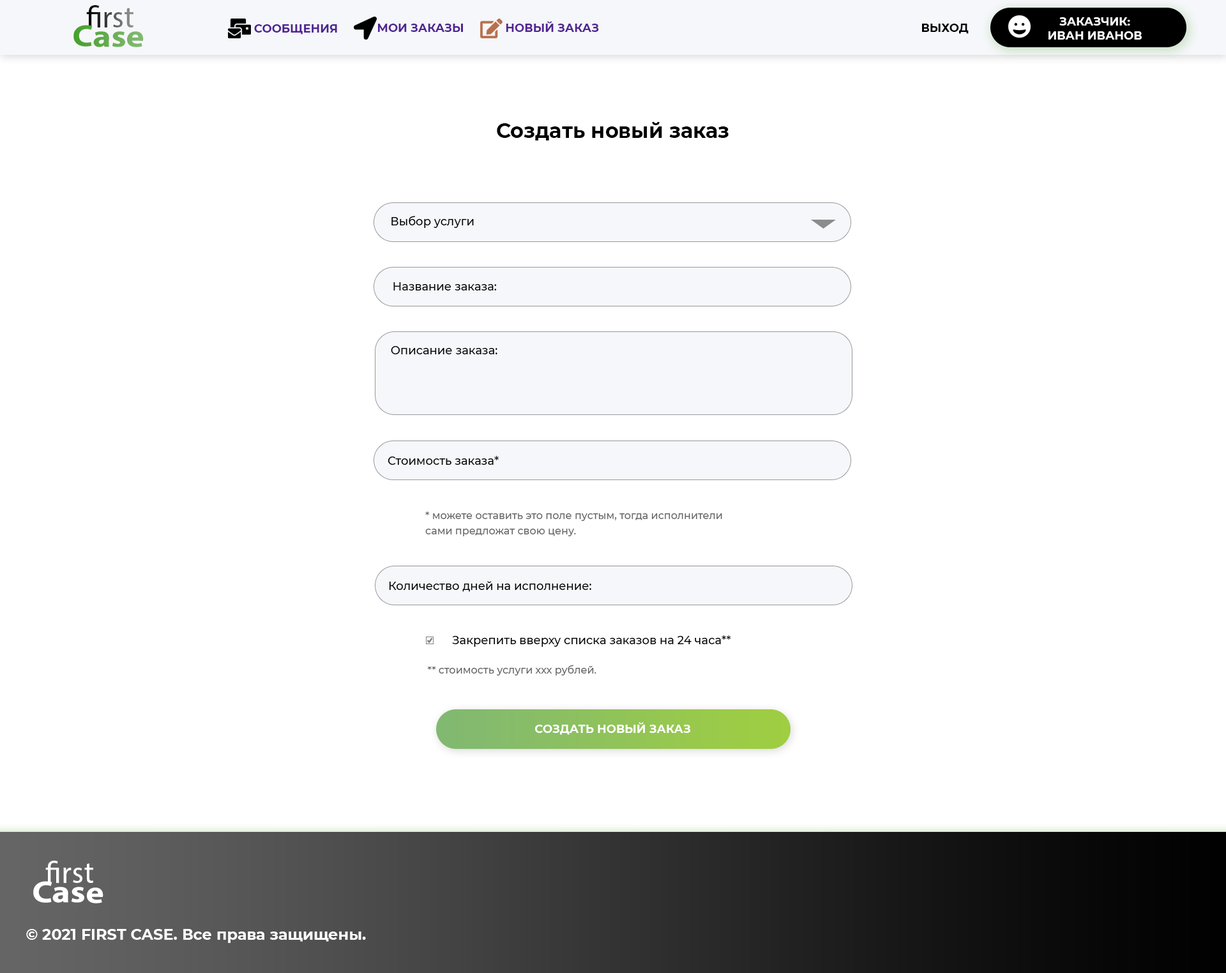
<style>
.page{position:relative;width:1226px;height:973px;background:#ffffff}
.page>*{position:absolute;margin:0}
.t1{font:30.6px "MyriadPro-Regular"}
.t2{font:11.5px "Montserrat-Bold";color:#ffffff;text-transform:uppercase}
.t3{font:30.6px "MyriadPro-Bold";scale:1.13 1}
.t4{font:30.6px "MyriadPro-Regular";scale:1.13 1}
.t5{font:11.5px "Montserrat-Bold";color:#4f2492;text-transform:uppercase}
.t6{font:11.5px "Montserrat-Bold";color:#502492;text-transform:uppercase}
.t7{font:11.5px "Montserrat-Bold";color:#512592;text-transform:uppercase}
.t8{font:11.5px "Montserrat-Bold";color:#000000;text-transform:uppercase}
.t9{font:20.4px "Montserrat-Bold";color:#000000}
.t10{font:11.5px "Montserrat-Medium";color:#000000}
.t11{font:10.2px/15.3px "Montserrat-Medium";color:#666666}
.t12{font:10.2px "Montserrat-Medium";color:#666666}
.t13{font:30.6px "MyriadPro-Regular";color:#ffffff}
.t14{font:30.6px "MyriadPro-Bold";color:#ffffff;scale:1.13 1}
.t15{font:30.6px "MyriadPro-Regular";color:#ffffff;scale:1.13 1}
.t16{font:15.3px "Montserrat-Bold";color:#ffffff}
</style>
<div class="page">
<p class="t1" style="left:86px;top:5px;width:47px;height:22px">first</p>
<p class="t2" style="left:1048px;top:17px;width:93px;height:23px;text-align:center">заказчик:<br>иВАН иВАНОВ</p>
<p class="t3" style="left:73px;top:25px;width:71px;height:22px;rotate:1deg"><span class="t4">       </span>Case</p>
<p class="t5" style="left:254px;top:24px;width:83px;height:10px">СООБЩЕНИЯ</p>
<p class="t6" style="left:378px;top:24px;width:85px;height:8px">МОИ ЗАКАЗЫ</p>
<p class="t7" style="left:506px;top:21px;width:93px;height:11px">новый заказ</p>
<p class="t8" style="left:922px;top:24px;width:46px;height:10px">ВЫХОД</p>
<p class="t9" style="left:497px;top:122px;width:231px;height:18px">Создать новый заказ</p>
<p class="t10" style="left:391px;top:216px;width:83px;height:12px">Выбор услуги</p>
<p class="t10" style="left:393px;top:282px;width:104px;height:8px">Название заказа:</p>
<p class="t10" style="left:391px;top:346px;width:106px;height:8px">Описание заказа:</p>
<p class="t10" style="left:387px;top:456px;width:112px;height:9px">Стоимость заказа*</p>
<p class="t11" style="left:425px;top:511px;width:297px;height:25px">* можете оставить это поле пустым, тогда исполнители <br>сами предложат свою цену.</p>
<p class="t10" style="left:389px;top:581px;width:202px;height:11px">Количество дней на исполнение:</p>
<p class="t10" style="left:452px;top:635px;width:279px;height:12px">Закрепить вверху списка заказов на 24 часа**</p>
<p class="t12" style="left:427px;top:665px;width:169px;height:10px">** стоимость услуги ххх рублей.</p>
<p class="t2" style="left:535px;top:722px;width:156px;height:13px">СОЗДАТЬ НОВЫЙ ЗАКАЗ</p>
<p class="t13" style="left:45px;top:861px;width:48px;height:22px">first</p>
<p class="t14" style="left:33px;top:881px;width:70px;height:22px;rotate:1deg"><span class="t15">       </span>Case</p>
<p class="t16" style="left:26px;top:929px;width:340px;height:14px">© 2021 FIRST CASE. Все права защищены.</p>
</div>
